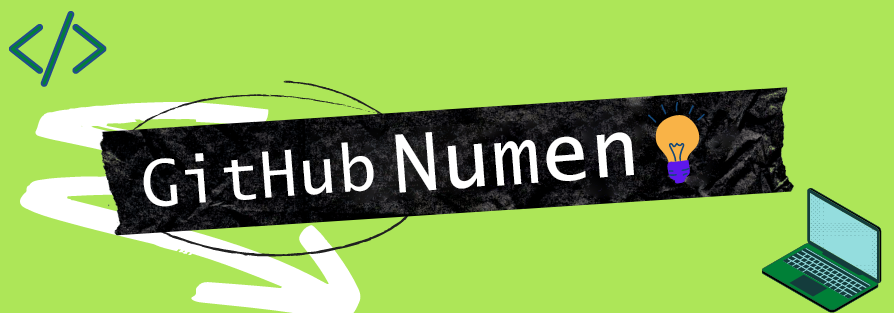
<style>
.page{position:relative;width:894px;height:313px;background:#ade658}
.page>*{position:absolute;margin:0}
.t1{font:80px "LucidaSans-Typewriter";letter-spacing:0.02em;color:#ffffff}
.t2{font:63.4px "LucidaSans-Typewriter";letter-spacing:0.02em;color:#ffffff}
</style>
<div class="page">
<p class="t1" style="left:395px;top:132px;width:239px;height:61px;rotate:-4deg">Numen</p>
<p class="t2" style="left:143px;top:142px;width:231px;height:65px;rotate:-4deg">GitHub</p>
</div>
